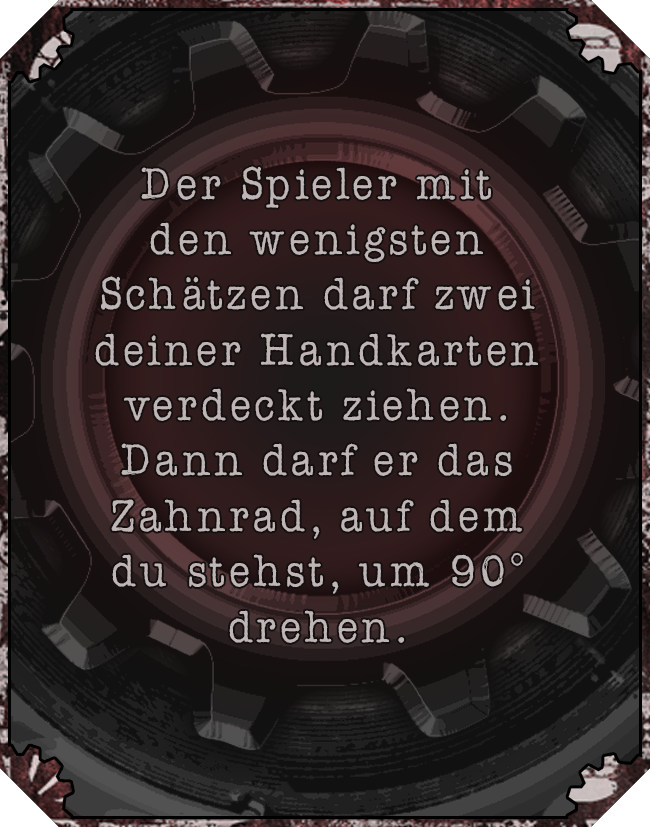
<style>
.page{position:relative;width:650px;height:827px}
.page>*{position:absolute;margin:0}
.t1{font:46.1px "AmerTypewriterITCbyBT-Medium";letter-spacing:0.02em;color:#c0b5b5}
</style>
<div class="page">
<p class="t1" style="left:95px;top:166px;width:443px;height:477px;text-align:center">Der Spieler mit den wenigsten Schätzen darf zwei deiner Handkarten verdeckt ziehen. Dann darf er das Zahnrad, auf dem du stehst, um 90° drehen.</p>
</div>
